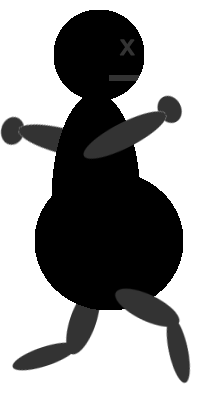
<style>
.page{position:relative;width:200px;height:400px;background:#ffffff}
.page>*{position:absolute;margin:0}
.t1{font:29.2px "ArialMT";color:#333333;font-weight:bold}
</style>
<div class="page">
<p class="t1" style="left:119px;top:39px;width:16px;height:17px">x</p>
</div>
